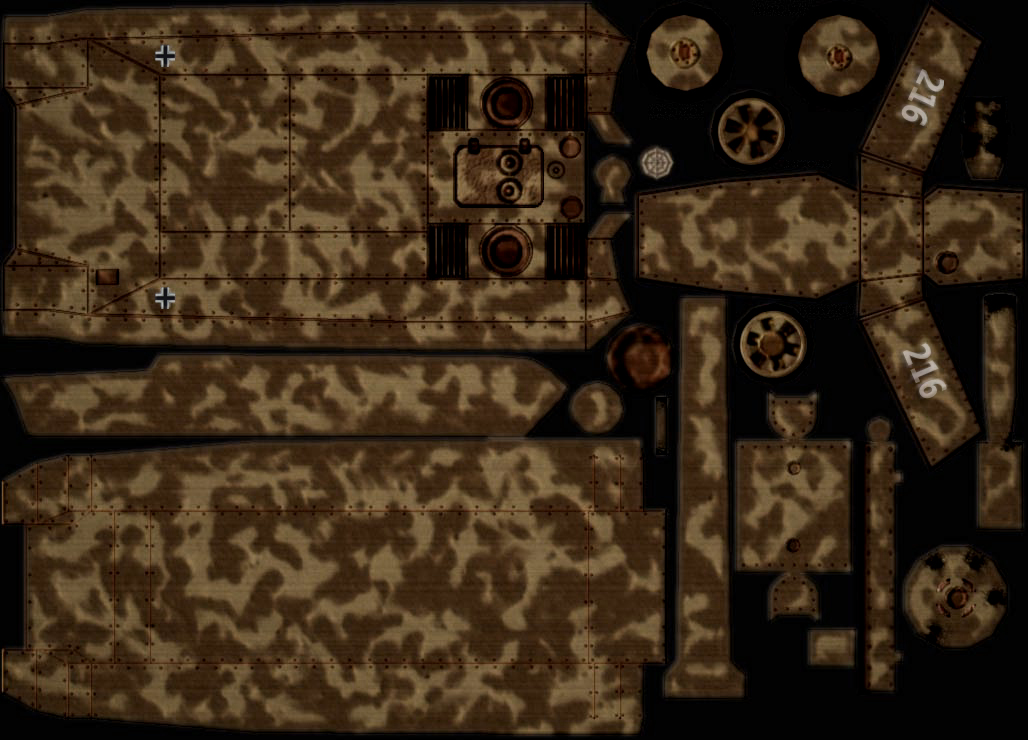
<style>
.page{position:relative;width:1028px;height:740px}
.page>*{position:absolute;margin:0}
.t1{font:37.4px "SegoeUI-Bold";color:#aca096;scale:0.87 1}
.t2{font:37.4px "SegoeUI-Bold";color:#aa9e92;scale:0.87 1}
</style>
<div class="page">
<p class="t1" style="left:901px;top:68px;width:43px;height:59px;rotate:115deg">216</p>
<p class="t2" style="left:902px;top:343px;width:45px;height:56px;rotate:67deg">216</p>
</div>
